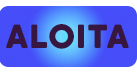
<style>
.page{position:relative;width:137px;height:77px;background:#ffffff}
.page>*{position:absolute;margin:0}
.t1{font:31.8px "KatahdinRound-Regular";color:#371640}
</style>
<div class="page">
<p class="t1" style="left:6px;top:24px;width:123px;height:25px">ALOITA</p>
</div>
